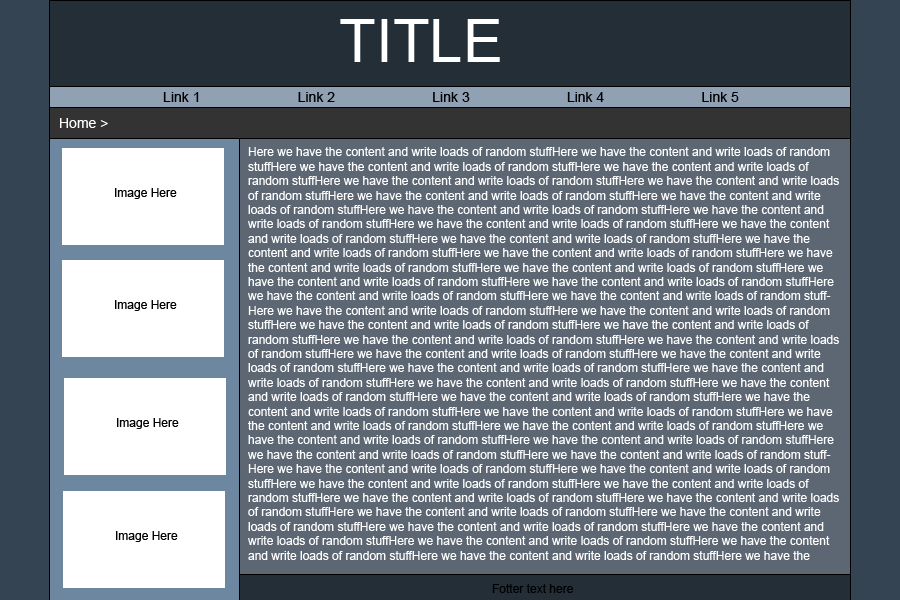
<style>
.page{position:relative;width:900px;height:600px;background:#5d6773}
.page>*{position:absolute;margin:0}
.t1{font:60px "ArialMT";color:#ffffff}
.t2{font:14px "ArialMT";color:#000000}
.t3{font:14px "ArialMT";color:#ffffff}
.t4{font:12px "ArialMT";color:#ffffff}
.t5{font:12px "ArialMT";color:#000000}
</style>
<div class="page">
<p class="t1" style="left:340px;top:19px;width:160px;height:43px">TITLE</p>
<p class="t2" style="left:163px;top:92px;width:576px;height:10px">Link 1                         Link 2                         Link 3                         Link 4                         Link 5</p>
<p class="t3" style="left:60px;top:118px;width:48px;height:10px">Home &gt;</p>
<p class="t4" style="left:248px;top:147px;width:591px;height:413px">Here we have the content and write loads of random stuffHere we have the content and write loads of random stuffHere we have the content and write loads of random stuffHere we have the content and write loads of random stuffHere we have the content and write loads of random stuffHere we have the content and write loads of random stuffHere we have the content and write loads of random stuffHere we have the content and write loads of random stuffHere we have the content and write loads of random stuffHere we have the content and write loads of random stuffHere we have the content and write loads of random stuffHere we have the content and write loads of random stuffHere we have the content and write loads of random stuffHere we have the content and write loads of random stuffHere we have the content and write loads of random stuffHere we have the content and write loads of random stuffHere we have the content and write loads of random stuffHere we have the content and write loads of random stuffHere we have the content and write loads of random stuffHere we have the content and write loads of random stuffHere we have the content and write loads of random stuffHere we have the content and write loads of random stuffHere we have the content and write loads of random stuffHere we have the content and write loads of random stuffHere we have the content and write loads of random stuffHere we have the content and write loads of random stuffHere we have the content and write loads of random stuffHere we have the content and write loads of random stuffHere we have the content and write loads of random stuffHere we have the content and write loads of random stuffHere we have the content and write loads of random stuffHere we have the content and write loads of random stuffHere we have the content and write loads of random stuffHere we have the content and write loads of random stuffHere we have the content and write loads of random stuffHere we have the content and write loads of random stuffHere we have the content and write loads of random stuffHere we have the content and write loads of random stuffHere we have the content and write loads of random stuffHere we have the content and write loads of random stuffHere we have the content and write loads of random stuffHere we have the content and write loads of random stuffHere we have the content and write loads of random stuffHere we have the content and write loads of random stuffHere we have the content and write loads of random stuffHere we have the content and write loads of random stuffHere we have the content and write loads of random stuffHere we have the content and write loads of random stuffHere we have the content and write loads of random stuffHere we have the content and write loads of random stuffHere we have the content and write loads of random stuffHere we have the content and write loads of random stuffHere we have the content and write loads of random stuffHere we have the content and write loads of random stuffHere we have the content and write loads of random stuffHere we have the content and write loads of random stuffHere we have the content and write loads of random stuffHere we have the content and write loads of random stuffHere we have the content and write loads of random stuffHere we have the content and write loads of random stuffHere we have the content and write loads of random stuffHere we have the content and write loads of random stuffHere we have the content and write loads of random stuffHere we have the content and write loads of random stuffHere we have the content and write loads of random stuffHere we have the content and write loads of random stuffHere we have the content and write loads of random stuffHere we have the content and write loads of random stuffHere we have the content and write loads of random stuffHere we have the content and write loads of random stuff</p>
<p class="t5" style="left:492px;top:584px;width:81px;height:9px">Fotter text here</p>
</div>
